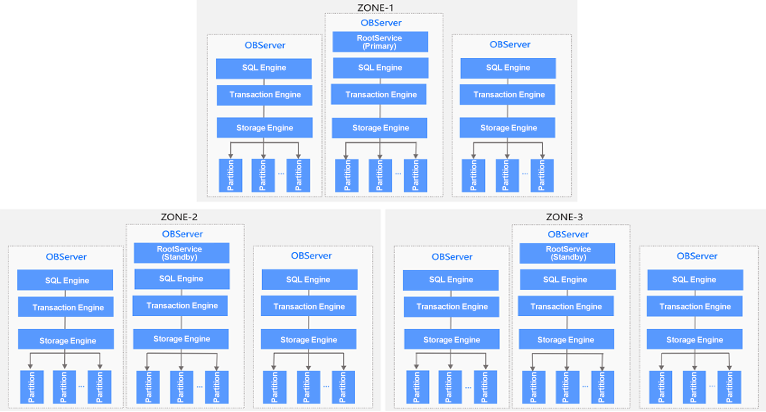
<style>
.page{position:relative;width:766px;height:412px;background:#ffffff}
.page>*{position:absolute;margin:0}
.t1{font:8px/8px "Arial-BoldMT";letter-spacing:-0.02em;color:#fefeff}
.t2{font:8px "Arial-BoldMT";letter-spacing:-0.02em;color:#fefeff}
</style>
<div class="page">
<p class="t1" style="left:357px;top:35px;width:45px;height:16px;text-align:center">RootService (Primary)</p>
<p class="t2" style="left:242px;top:64px;width:44px;height:8px">SQL Engine</p>
<p class="t2" style="left:358px;top:64px;width:44px;height:8px">SQL Engine</p>
<p class="t2" style="left:486px;top:64px;width:44px;height:8px">SQL Engine</p>
<p class="t2" style="left:229px;top:91px;width:72px;height:8px">Transaction Engine</p>
<p class="t2" style="left:345px;top:91px;width:72px;height:8px">Transaction Engine</p>
<p class="t2" style="left:473px;top:91px;width:72px;height:8px">Transaction Engine</p>
<p class="t2" style="left:236px;top:124px;width:57px;height:8px">Storage Engine</p>
<p class="t2" style="left:352px;top:124px;width:57px;height:8px">Storage Engine</p>
<p class="t2" style="left:480px;top:124px;width:57px;height:8px">Storage Engine</p>
<p class="t2" style="left:227px;top:160px;width:7px;height:31px;rotate:-90deg">Partition</p>
<p class="t2" style="left:259px;top:160px;width:7px;height:31px;rotate:-90deg">Partition</p>
<p class="t2" style="left:295px;top:160px;width:7px;height:31px;rotate:-90deg">Partition</p>
<p class="t2" style="left:344px;top:160px;width:7px;height:31px;rotate:-90deg">Partition</p>
<p class="t2" style="left:376px;top:160px;width:7px;height:31px;rotate:-90deg">Partition</p>
<p class="t2" style="left:412px;top:160px;width:7px;height:31px;rotate:-90deg">Partition</p>
<p class="t2" style="left:470px;top:160px;width:7px;height:31px;rotate:-90deg">Partition</p>
<p class="t2" style="left:502px;top:160px;width:7px;height:31px;rotate:-90deg">Partition</p>
<p class="t2" style="left:538px;top:160px;width:7px;height:31px;rotate:-90deg">Partition</p>
<p class="t1" style="left:157px;top:246px;width:45px;height:16px;text-align:center">RootService (Standby)</p>
<p class="t1" style="left:546px;top:246px;width:45px;height:16px;text-align:center">RootService (Standby)</p>
<p class="t2" style="left:45px;top:277px;width:44px;height:8px">SQL Engine</p>
<p class="t2" style="left:159px;top:275px;width:44px;height:8px">SQL Engine</p>
<p class="t2" style="left:286px;top:276px;width:44px;height:8px">SQL Engine</p>
<p class="t2" style="left:429px;top:276px;width:44px;height:8px">SQL Engine</p>
<p class="t2" style="left:543px;top:276px;width:44px;height:8px">SQL Engine</p>
<p class="t2" style="left:672px;top:276px;width:44px;height:8px">SQL Engine</p>
<p class="t2" style="left:32px;top:304px;width:72px;height:8px">Transaction Engine</p>
<p class="t2" style="left:146px;top:302px;width:72px;height:8px">Transaction Engine</p>
<p class="t2" style="left:273px;top:303px;width:72px;height:8px">Transaction Engine</p>
<p class="t2" style="left:416px;top:303px;width:72px;height:8px">Transaction Engine</p>
<p class="t2" style="left:530px;top:303px;width:72px;height:8px">Transaction Engine</p>
<p class="t2" style="left:659px;top:303px;width:72px;height:8px">Transaction Engine</p>
<p class="t2" style="left:39px;top:337px;width:57px;height:8px">Storage Engine</p>
<p class="t2" style="left:153px;top:335px;width:57px;height:8px">Storage Engine</p>
<p class="t2" style="left:280px;top:336px;width:57px;height:8px">Storage Engine</p>
<p class="t2" style="left:423px;top:336px;width:57px;height:8px">Storage Engine</p>
<p class="t2" style="left:537px;top:336px;width:57px;height:8px">Storage Engine</p>
<p class="t2" style="left:666px;top:336px;width:57px;height:8px">Storage Engine</p>
<p class="t2" style="left:28px;top:372px;width:7px;height:31px;rotate:-90deg">Partition</p>
<p class="t2" style="left:60px;top:372px;width:7px;height:31px;rotate:-90deg">Partition</p>
<p class="t2" style="left:96px;top:372px;width:7px;height:31px;rotate:-90deg">Partition</p>
<p class="t2" style="left:145px;top:372px;width:7px;height:31px;rotate:-90deg">Partition</p>
<p class="t2" style="left:177px;top:372px;width:7px;height:31px;rotate:-90deg">Partition</p>
<p class="t2" style="left:213px;top:372px;width:7px;height:31px;rotate:-90deg">Partition</p>
<p class="t2" style="left:271px;top:372px;width:7px;height:31px;rotate:-90deg">Partition</p>
<p class="t2" style="left:303px;top:372px;width:7px;height:31px;rotate:-90deg">Partition</p>
<p class="t2" style="left:339px;top:372px;width:7px;height:31px;rotate:-90deg">Partition</p>
<p class="t2" style="left:413px;top:372px;width:7px;height:31px;rotate:-90deg">Partition</p>
<p class="t2" style="left:445px;top:372px;width:7px;height:31px;rotate:-90deg">Partition</p>
<p class="t2" style="left:481px;top:372px;width:7px;height:31px;rotate:-90deg">Partition</p>
<p class="t2" style="left:530px;top:372px;width:7px;height:31px;rotate:-90deg">Partition</p>
<p class="t2" style="left:562px;top:372px;width:7px;height:31px;rotate:-90deg">Partition</p>
<p class="t2" style="left:598px;top:372px;width:7px;height:31px;rotate:-90deg">Partition</p>
<p class="t2" style="left:658px;top:372px;width:7px;height:31px;rotate:-90deg">Partition</p>
<p class="t2" style="left:690px;top:372px;width:7px;height:31px;rotate:-90deg">Partition</p>
<p class="t2" style="left:726px;top:372px;width:7px;height:31px;rotate:-90deg">Partition</p>
</div>
